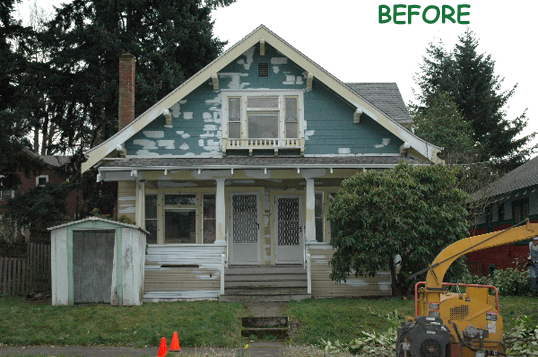
<style>
.page{position:relative;width:538px;height:357px}
.page>*{position:absolute;margin:0}
.t1{font:24px "ComicSansMS-Bold";color:#197339}
</style>
<div class="page">
<p class="t1" style="left:378px;top:4px;width:93px;height:21px">BEFORE</p>
</div>
